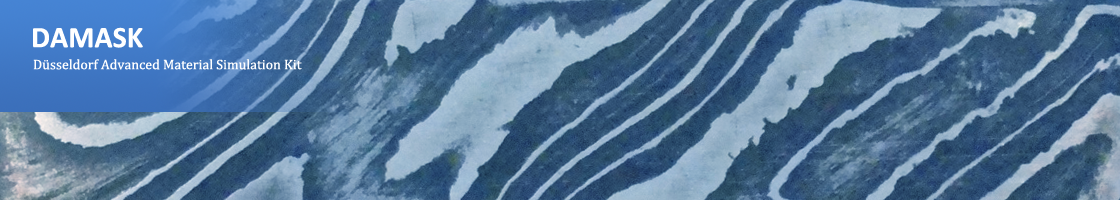
<style>
.page{position:relative;width:1120px;height:200px}
.page>*{position:absolute;margin:0}
.t1{font:30px "Calibri-Bold";color:#ffffff}
.t2{font:14px "Cambria";color:#ffffff}
</style>
<div class="page">
<p class="t1" style="left:33px;top:27px;width:110px;height:21px">DAMASK</p>
<p class="t2" style="left:33px;top:59px;width:269px;height:11px">Düsseldorf Advanced Material Simulation Kit</p>
</div>
